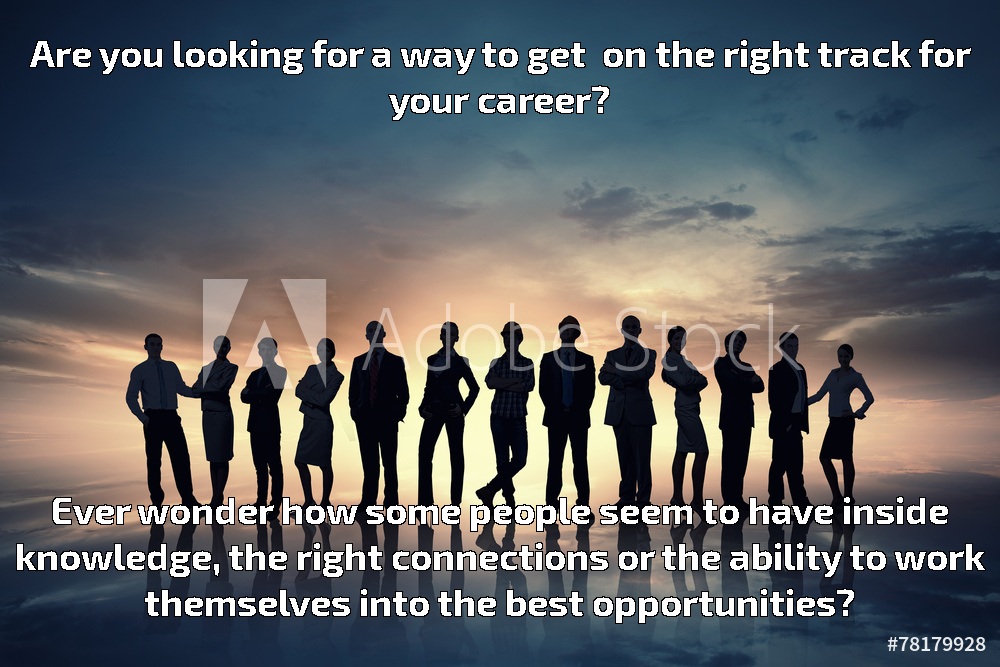
<style>
.page{position:relative;width:1000px;height:667px}
.page>*{position:absolute;margin:0}
.t1{font:38.5px "Exo2-Bold";color:#ffffff}
</style>
<div class="page">
<p class="t1" style="left:30px;top:40px;width:941px;height:80px;text-align:center">Are you looking for a way to get  on the right track for your career?</p>
<p class="t1" style="left:17px;top:497px;width:968px;height:126px;text-align:center">Ever wonder how some people seem to have inside knowledge, the right connections or the ability to work themselves into the best opportunities?</p>
</div>
